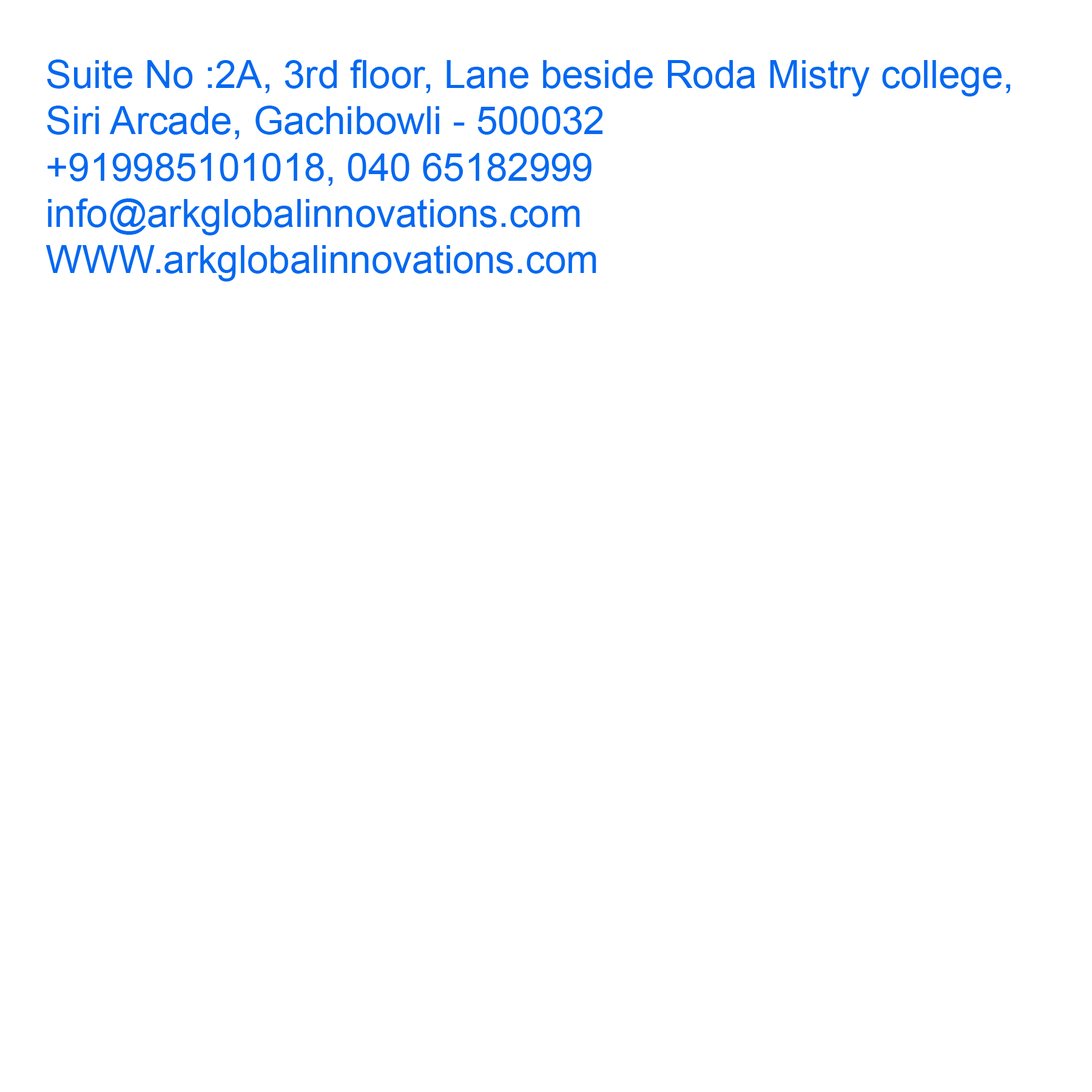
<style>
.page{position:relative;width:1092px;height:1092px;background:#ffffff}
.page>*{position:absolute;margin:0}
.t1{font:38.5px "ArialMT";color:#0568f0}
</style>
<div class="page">
<p class="t1" style="left:45px;top:59px;width:966px;height:222px">Suite No :2A, 3rd floor, Lane beside Roda Mistry college, <br>Siri Arcade, Gachibowli - 500032 <br>+919985101018, 040 65182999<br>info@arkglobalinnovations.com<br>WWW.arkglobalinnovations.com</p>
</div>
